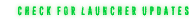
<style>
.page{position:relative;width:189px;height:20px;background:#ffffff}
.page>*{position:absolute;margin:0}
.t1{font:12px "Sunzoomspark";color:#00d03b}
</style>
<div class="page">
<p class="t1" style="left:18px;top:6px;width:171px;height:10px">C H E C K  F O R  L A U N C H E R  U P D A T E S</p>
</div>
